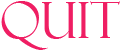
<style>
.page{position:relative;width:120px;height:51px;background:#ffffff}
.page>*{position:absolute;margin:0}
.t1{font:49.5px "FelixTitlingMT";color:#ef1e63}
</style>
<div class="page">
<p class="t1" style="left:1px;top:1px;width:120px;height:49px">QUIT</p>
</div>
